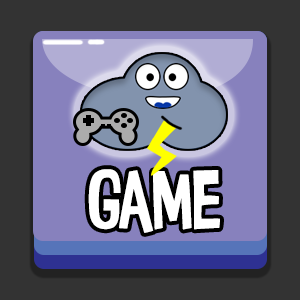
<style>
.page{position:relative;width:300px;height:300px;background:#333333}
.page>*{position:absolute;margin:0}
.t1{font:85.1px "InsideOut";color:#ffffff;scale:0.82 1}
</style>
<div class="page">
<p class="t1" style="left:88px;top:169px;width:132px;height:64px">game</p>
</div>
